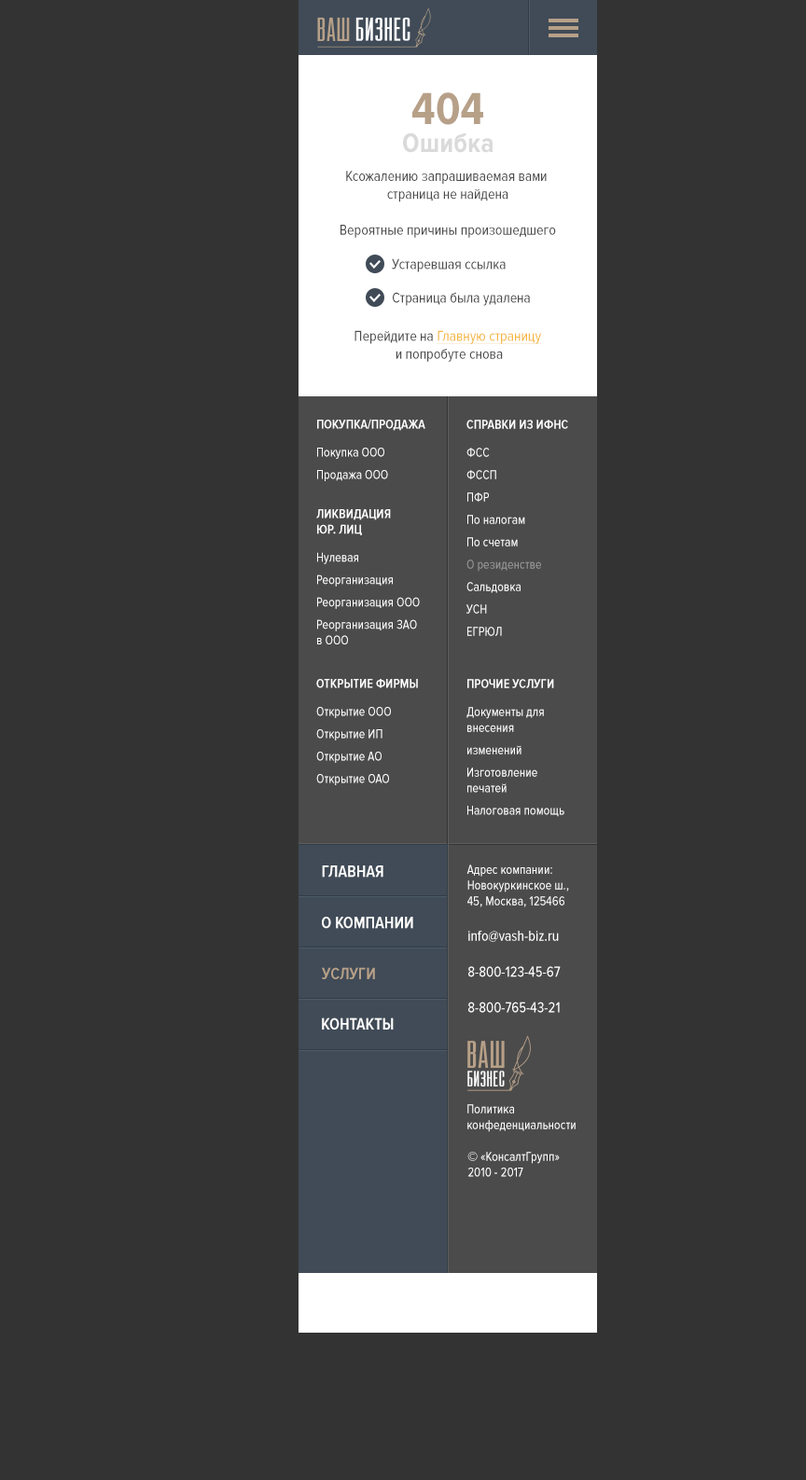
<style>
.page{position:relative;width:806px;height:1480px;background:#333333}
.page>*{position:absolute;margin:0}
.t1{font:46.6px "ProximaNovaCond-Bold";color:#b7a088}
.t2{font:28px "ProximaNovaCond-Bold";color:#dadada}
.t3{font:14.9px "ProximaNovaCond-Regular";color:#4b4b4b}
.t4{font:14.9px/33.6px "ProximaNovaCond-Regular";color:#4b4b4b}
.t5{font:14.9px "ProximaNovaCond-Regular";color:#f4b740;text-decoration:underline}
.t6{font:13.1px "ProximaNovaCond-Semibold";color:#ffffff;text-transform:uppercase}
.t7{font:13.1px/28px "ProximaNovaCond-Regular";color:#ffffff}
.t8{font:13.1px/22.4px "ProximaNovaCond-Regular";color:#ffffff}
.t9{font:13.1px/22.4px "ProximaNovaCond-Regular";color:#999999}
.t10{font:13.1px "ProximaNovaCond-Regular";color:#ffffff}
.t11{font:16.8px "ProximaNovaCond-Semibold";color:#ffffff;text-transform:uppercase}
.t12{font:14.9px "ProximaNovaCond-Regular";color:#ffffff}
.t13{font:16.8px "ProximaNovaCond-Semibold";color:#b7a088;text-transform:uppercase}
</style>
<div class="page">
<p class="t1" style="left:412px;top:92px;width:71px;height:33px">404</p>
<p class="t2" style="left:403px;top:132px;width:89px;height:21px">Ошибка</p>
<p class="t3" style="left:346px;top:171px;width:200px;height:31px;text-align:center">Ксожалению запрашиваемая вами <br>страница не найдена</p>
<p class="t3" style="left:340px;top:225px;width:216px;height:13px">Вероятные причины произошедшего</p>
<p class="t4" style="left:392px;top:258px;width:138px;height:48px"><span class="t3">Устаревшая ссылка<br></span>Страница была удалена</p>
<p class="t3" style="left:354px;top:330px;width:188px;height:32px;text-align:center">Перейдите на <span class="t5">Главную страницу</span> <br>и попробуте снова</p>
<p class="t6" style="left:317px;top:419px;width:108px;height:62px">Покупка/Продажа<br><span class="t7">Покупка ООО<br></span><span class="t8">Продажа ООО</span></p>
<p class="t8" style="left:466px;top:420px;width:102px;height:216px"><span class="t6">Справки из ИФНС<br></span><span class="t7">ФСС<br></span>ФССП<br>ПФР<br>По налогам<br>По счетам<br><span class="t9">О резиденстве<br></span>Сальдовка<br>УСН<br>ЕГРЮЛ</p>
<p class="t8" style="left:316px;top:509px;width:104px;height:135px"><span class="t6">Ликвидация<br>юр. лиц<br></span><span class="t7">Нулевая<br></span>Реорганизация<br>Реорганизация ООО<br>Реорганизация ЗАО <br><span class="t10">в ООО</span></p>
<p class="t8" style="left:316px;top:679px;width:102px;height:106px"><span class="t6">Открытие фирмы<br></span><span class="t7">Открытие ООО<br></span>Открытие ИП<br>Открытие АО<br>Открытие ОАО</p>
<p class="t8" style="left:466px;top:679px;width:98px;height:138px"><span class="t6">Прочие услуги<br></span><span class="t7">Документы для <br></span><span class="t10">внесения <br></span>изменений<br>Изготовление <br><span class="t10">печатей<br></span>Налоговая помощь</p>
<p class="t11" style="left:322px;top:865px;width:61px;height:13px">ГЛАВНАЯ</p>
<p class="t10" style="left:466px;top:864px;width:103px;height:43px">Адрес компании:<br>Новокуркинское ш., <br>45, Москва, 125466</p>
<p class="t11" style="left:322px;top:917px;width:91px;height:12px">О КОМПАНИИ</p>
<p class="t12" style="left:468px;top:931px;width:92px;height:82px">info@vash-biz.ru<br><br>8-800-123-45-67<br><br>8-800-765-43-21</p>
<p class="t13" style="left:322px;top:967px;width:53px;height:12px">УСЛУГИ</p>
<p class="t11" style="left:322px;top:1017px;width:72px;height:13px">КОНТАКТЫ</p>
<p class="t10" style="left:467px;top:1104px;width:108px;height:28px">Политика <br>конфеденциальности</p>
<p class="t10" style="left:467px;top:1152px;width:93px;height:25px">© «КонсалтГрупп»<br>2010 - 2017</p>
</div>
